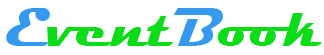
<style>
.page{position:relative;width:324px;height:55px;background:#ffffff}
.page>*{position:absolute;margin:0}
.t1{font:56px "Magneto-Bold";color:#0add18}
.t2{font:56px "Magneto-Bold";color:#3499ef}
</style>
<div class="page">
<p class="t1" style="left:6px;top:8px;width:316px;height:38px"><span class="t2">E</span>vent<span class="t2">B</span>ook</p>
</div>
